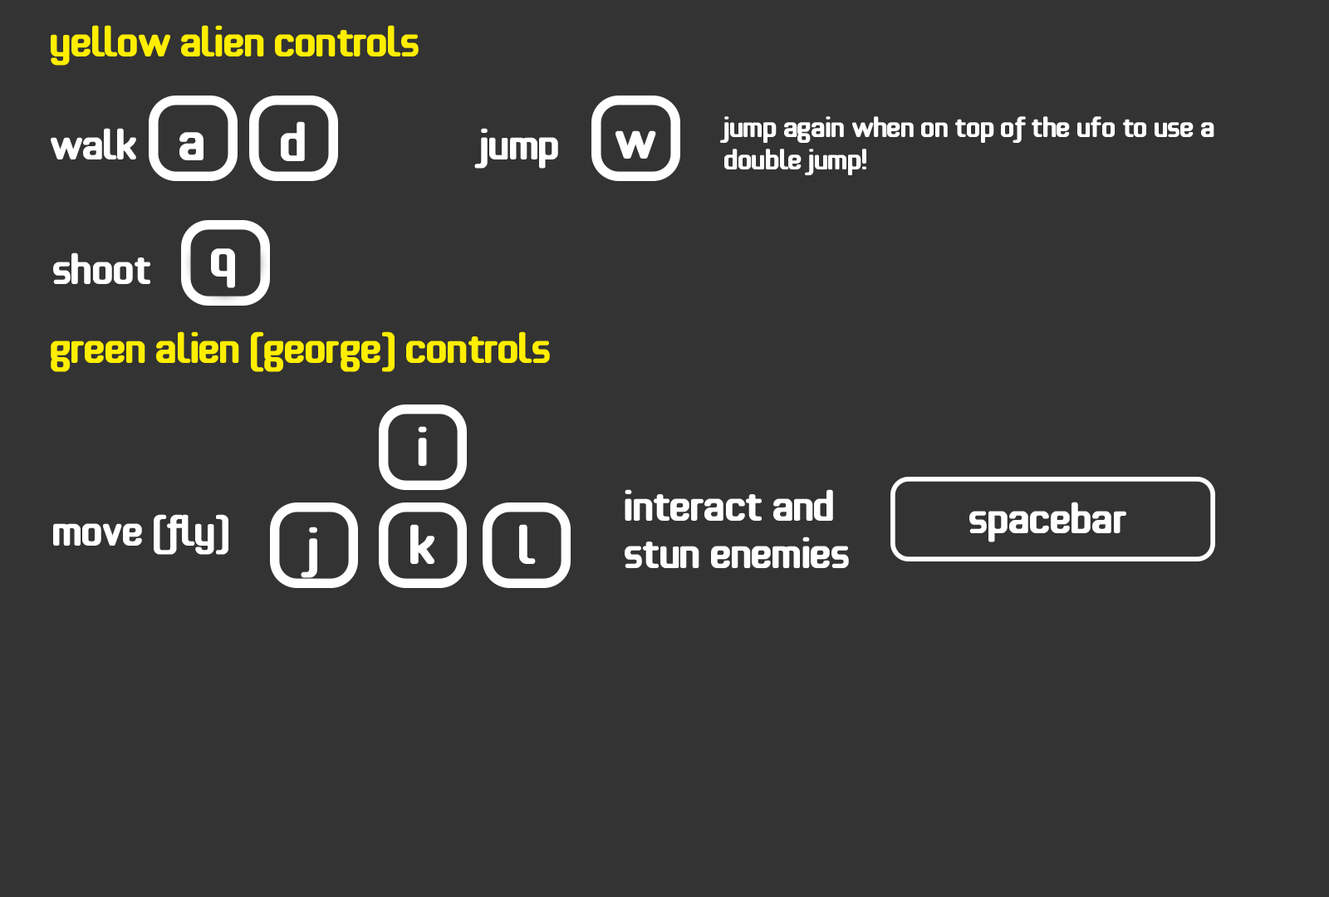
<style>
.page{position:relative;width:1329px;height:897px;background:#333333}
.page>*{position:absolute;margin:0}
.t1{font:39.9px "effortless";color:#ffee00}
.t2{font:26.6px "effortless";color:#ffffff}
.t3{font:39.9px "effortless";color:#ffffff}
</style>
<div class="page">
<p class="t1" style="left:51px;top:25px;width:368px;height:41px">yellow alien controls</p>
<p class="t2" style="left:720px;top:116px;width:494px;height:59px">jump again when on top of the UFO to use a double jump!</p>
<p class="t3" style="left:51px;top:128px;width:85px;height:31px">walk</p>
<p class="t3" style="left:474px;top:128px;width:84px;height:41px">jump</p>
<p class="t3" style="left:53px;top:253px;width:97px;height:31px">shoot</p>
<p class="t1" style="left:51px;top:331px;width:499px;height:41px">green alien (george) controls</p>
<p class="t3" style="left:625px;top:489px;width:224px;height:79px">interact and<br>stun enemies</p>
<p class="t3" style="left:969px;top:502px;width:157px;height:40px">spacebar</p>
<p class="t3" style="left:53px;top:514px;width:175px;height:41px">move (fly)</p>
</div>
